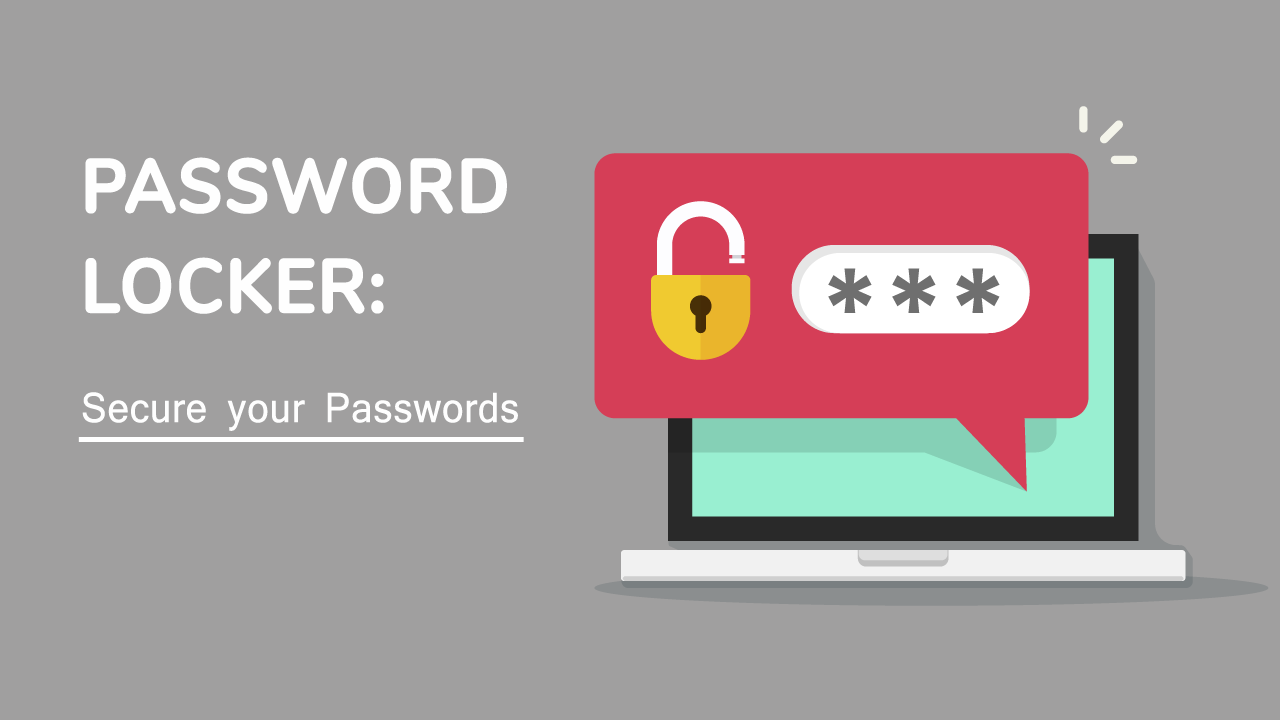
<style>
.page{position:relative;width:1280px;height:720px;background:#a09f9f}
.page>*{position:absolute;margin:0}
.t1{font:39.6px "Mangal";letter-spacing:0.025em;color:#fefefe;scale:0.93 1}
.t2{font:75px/100px "Nunito-Bold";letter-spacing:0.005em;color:#fefefe;font-weight:bold;scale:0.93 1}
</style>
<div class="page">
<p class="t1" style="left:82px;top:157px;width:436px;height:274px"><span class="t2">PASSWORD <br>LOCKER:<br><br></span>Secure your Passwords</p>
</div>
